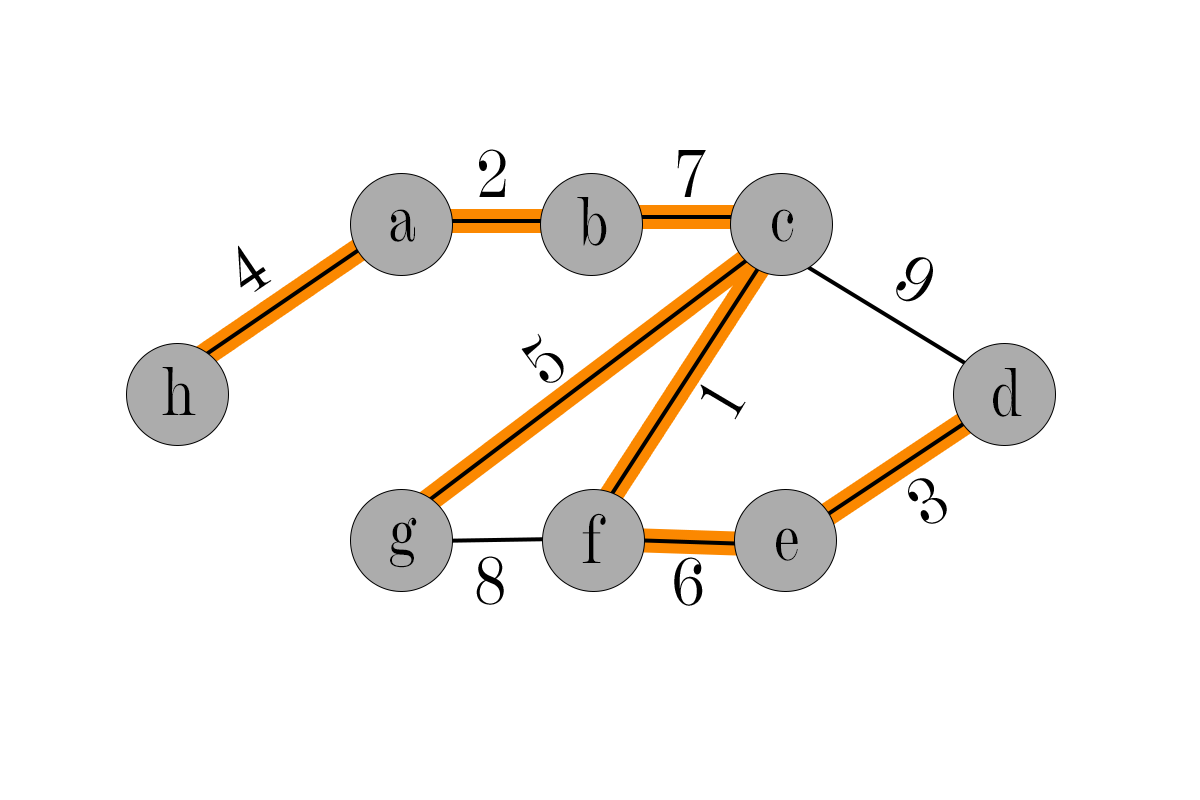
<style>
.page{position:relative;width:1200px;height:800px;background:#ffffff}
.page>*{position:absolute;margin:0}
.t1{font:66.7px "Chapman-Regular";letter-spacing:0.08em;color:#000000;scale:0.83 1}
</style>
<div class="page">
<p class="t1" style="left:479px;top:149px;width:27px;height:48px">2</p>
<p class="t1" style="left:677px;top:150px;width:29px;height:47px">7</p>
<p class="t1" style="left:577px;top:197px;width:30px;height:49px">b</p>
<p class="t1" style="left:390px;top:209px;width:25px;height:33px">a</p>
<p class="t1" style="left:772px;top:209px;width:22px;height:33px">c</p>
<p class="t1" style="left:238px;top:245px;width:34px;height:47px;rotate:-34deg">4</p>
<p class="t1" style="left:896px;top:257px;width:37px;height:45px;rotate:30deg">9</p>
<p class="t1" style="left:521px;top:333px;width:43px;height:50px;rotate:-41deg">5</p>
<p class="t1" style="left:162px;top:367px;width:34px;height:48px">h</p>
<p class="t1" style="left:993px;top:368px;width:29px;height:49px">d</p>
<p class="t1" style="left:700px;top:384px;width:46px;height:36px;rotate:-59deg">1</p>
<p class="t1" style="left:908px;top:478px;width:39px;height:46px;rotate:-32deg">3</p>
<p class="t1" style="left:390px;top:517px;width:27px;height:51px">g</p>
<p class="t1" style="left:582px;top:513px;width:24px;height:50px">f</p>
<p class="t1" style="left:776px;top:528px;width:22px;height:33px">e</p>
<p class="t1" style="left:476px;top:556px;width:28px;height:49px">8</p>
<p class="t1" style="left:674px;top:557px;width:29px;height:49px">6</p>
</div>
